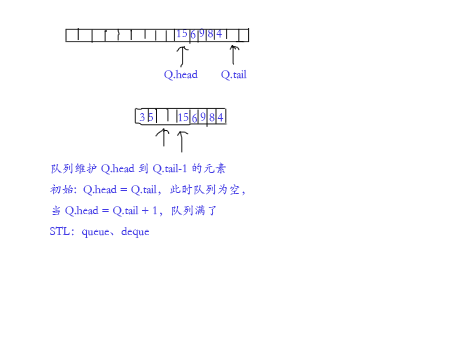
<style>
.page{position:relative;width:454px;height:340px;background:#ffffff}
.page>*{position:absolute;margin:0}
.t1{font:12px "STKaiti";color:#433be7}
</style>
<div class="page">
<p class="t1" style="left:177px;top:28px;width:45px;height:11px">15 6 9 8 4</p>
<p class="t1" style="left:164px;top:69px;width:83px;height:12px">Q.head        Q.tail</p>
<p class="t1" style="left:139px;top:112px;width:85px;height:11px">3 5        15 6 9 8 4</p>
<p class="t1" style="left:50px;top:162px;width:195px;height:76px">队列维护Q.head 到 Q.tail-1 的元素<br>初始：Q.head = Q.tail，此时队列为空，当 Q.head = Q.tail + 1，队列满了<br>STL：queue、deque</p>
</div>
